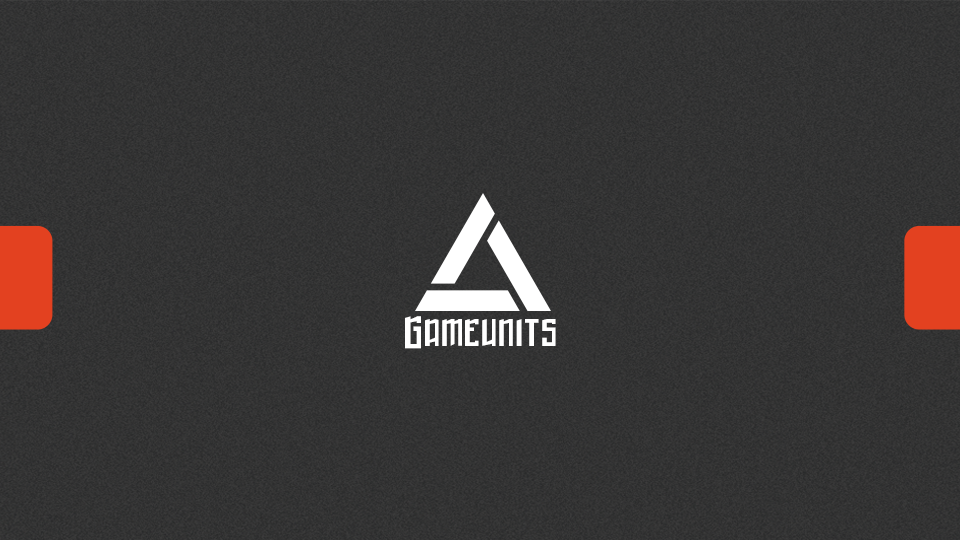
<style>
.page{position:relative;width:960px;height:540px}
.page>*{position:absolute;margin:0}
.t1{font:32px "Winter-in-Gotham-Regular";color:#ffffff}
</style>
<div class="page">
<p class="t1" style="left:405px;top:316px;width:151px;height:33px">Gameunits</p>
</div>
